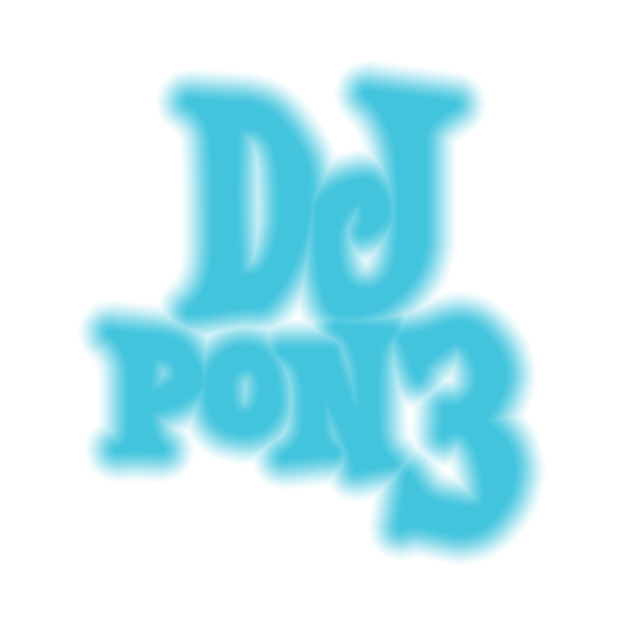
<style>
.page{position:relative;width:624px;height:624px;background:#ffffff}
.page>*{position:absolute;margin:0}
.t1{font:333.3px/216.7px "GenerationB";color:#42c4dd}
</style>
<div class="page">
<p class="t1" style="left:109px;top:91px;width:406px;height:443px;text-align:center">DJ<br>pon3</p>
</div>
